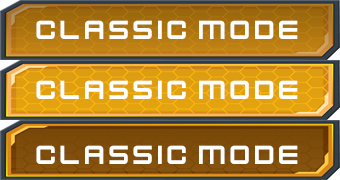
<style>
.page{position:relative;width:340px;height:180px}
.page>*{position:absolute;margin:0}
.t1{font:29.2px "KenVector-Future";color:#ffffff}
</style>
<div class="page">
<p class="t1" style="left:36px;top:20px;width:262px;height:19px">CLASSIC MODE</p>
<p class="t1" style="left:36px;top:80px;width:262px;height:19px">CLASSIC MODE</p>
<p class="t1" style="left:36px;top:145px;width:262px;height:19px">CLASSIC MODE</p>
</div>
